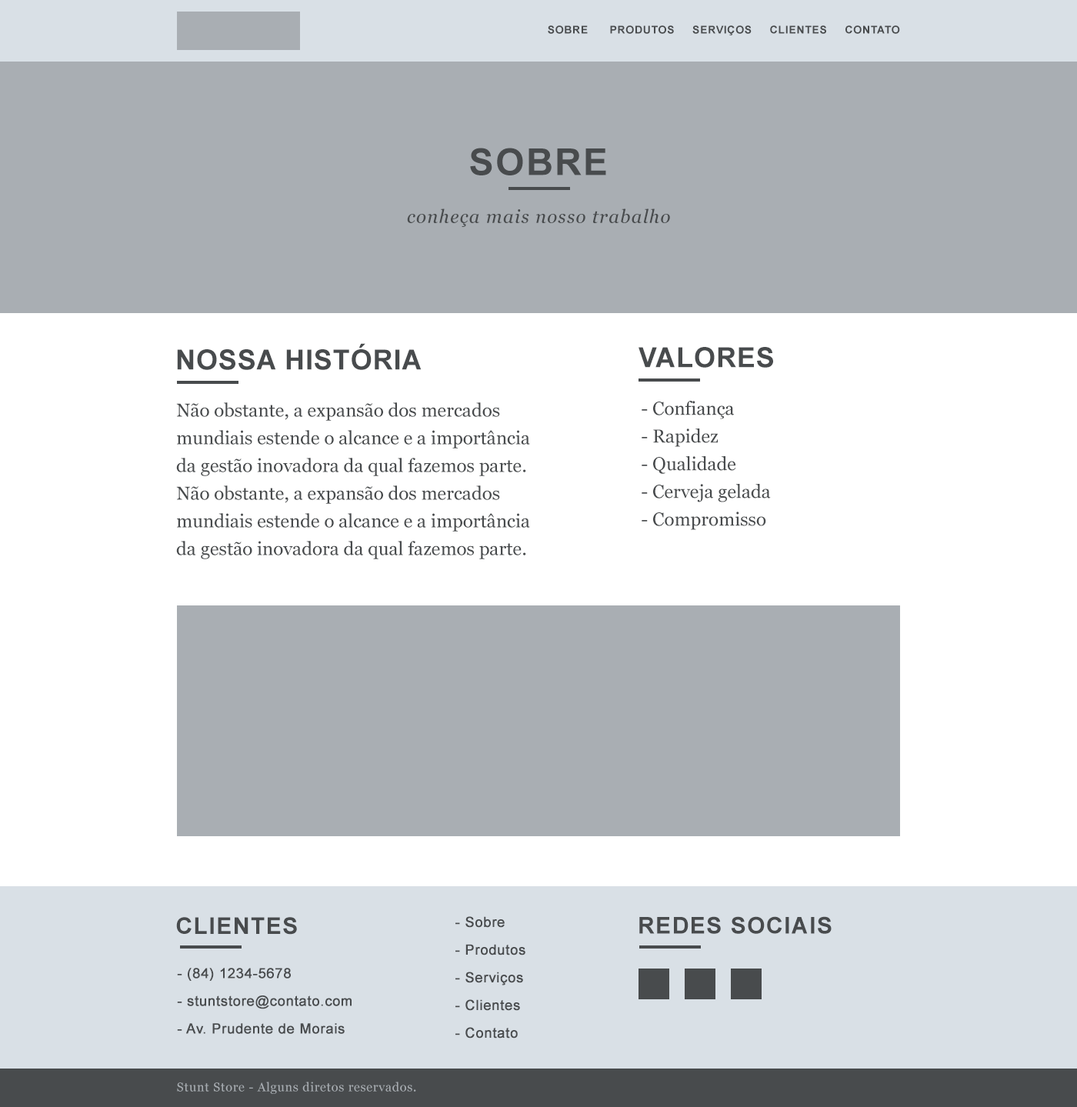
<style>
.page{position:relative;width:1077px;height:1107px;background:#a9aeb3}
.page>*{position:absolute;margin:0}
.t1{font:10.8px "Arial-BoldMT";letter-spacing:0.05em;color:#484b4d;text-transform:uppercase}
.t2{font:36.9px "Arial-BoldMT";letter-spacing:0.05em;color:#484b4d;text-transform:uppercase}
.t3{font:18.5px "Georgia-Italic";letter-spacing:0.05em;color:#484b4d}
.t4{font:27.7px "Arial-BoldMT";letter-spacing:0.025em;color:#484b4d;text-transform:uppercase}
.t5{font:18.5px/27.7px "Georgia";color:#484b4d}
.t6{font:23.1px "Arial-BoldMT";letter-spacing:0.05em;color:#484b4d;text-transform:uppercase}
.t7{font:13.8px/27.7px "ArialMT";letter-spacing:0.025em;color:#484b4d;font-weight:bold}
.t8{font:12.3px "Georgia";letter-spacing:0.05em;color:#a9aeb3}
</style>
<div class="page">
<p class="t1" style="left:548px;top:25px;width:352px;height:10px">Sobre      produtos     serviços     Clientes     contato</p>
<p class="t2" style="left:470px;top:148px;width:136px;height:27px">sobre</p>
<p class="t3" style="left:407px;top:208px;width:263px;height:19px">conheça mais nosso trabalho</p>
<p class="t4" style="left:177px;top:343px;width:245px;height:27px">nossa história</p>
<p class="t4" style="left:639px;top:347px;width:134px;height:21px">valores</p>
<p class="t5" style="left:642px;top:401px;width:129px;height:129px">- Confiança<br>- Rapidez<br>- Qualidade<br>- Cerveja gelada<br>- Compromisso</p>
<p class="t5" style="left:176px;top:402px;width:354px;height:157px">Não obstante, a expansão dos mercados<br>mundiais estende o alcance e a importância<br>da gestão inovadora da qual fazemos parte.<br>Não obstante, a expansão dos mercados<br>mundiais estende o alcance e a importância<br>da gestão inovadora da qual fazemos parte.</p>
<p class="t6" style="left:176px;top:917px;width:121px;height:18px">Clientes</p>
<p class="t7" style="left:455px;top:916px;width:70px;height:123px">- Sobre<br>- Produtos<br>- Serviços<br>- Clientes<br>- Contato</p>
<p class="t6" style="left:639px;top:916px;width:193px;height:18px">Redes Sociais</p>
<p class="t7" style="left:177px;top:968px;width:175px;height:66px">- (84) 1234-5678<br>- stuntstore@contato.com<br>- Av. Prudente de Morais</p>
<p class="t8" style="left:177px;top:1082px;width:239px;height:12px">Stunt Store - Alguns diretos reservados.</p>
</div>
